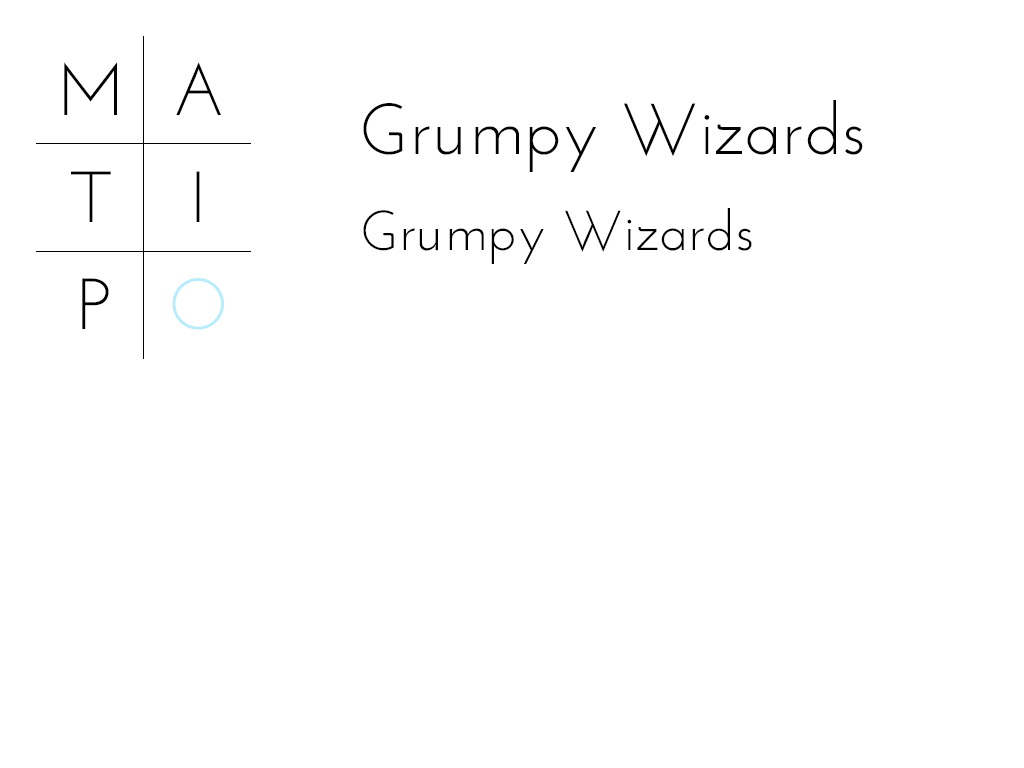
<style>
.page{position:relative;width:1024px;height:768px;background:#ffffff}
.page>*{position:absolute;margin:0}
.t1{font:72px "JosefinSans";color:#000000}
.t2{font:56px "JosefinSans";color:#000000}
.t3{font:72px "JosefinSans";color:#b6ecfb}
</style>
<div class="page">
<p class="t1" style="left:64px;top:62px;width:53px;height:53px">M</p>
<p class="t1" style="left:176px;top:62px;width:45px;height:53px">A</p>
<p class="t1" style="left:363px;top:100px;width:500px;height:72px">Grumpy Wizards</p>
<p class="t1" style="left:71px;top:171px;width:40px;height:51px">T</p>
<p class="t1" style="left:196px;top:171px;width:4px;height:51px">I</p>
<p class="t2" style="left:363px;top:208px;width:389px;height:56px">Grumpy Wizards</p>
<p class="t1" style="left:82px;top:278px;width:27px;height:51px">P</p>
<p class="t3" style="left:172px;top:278px;width:52px;height:52px">O</p>
</div>
